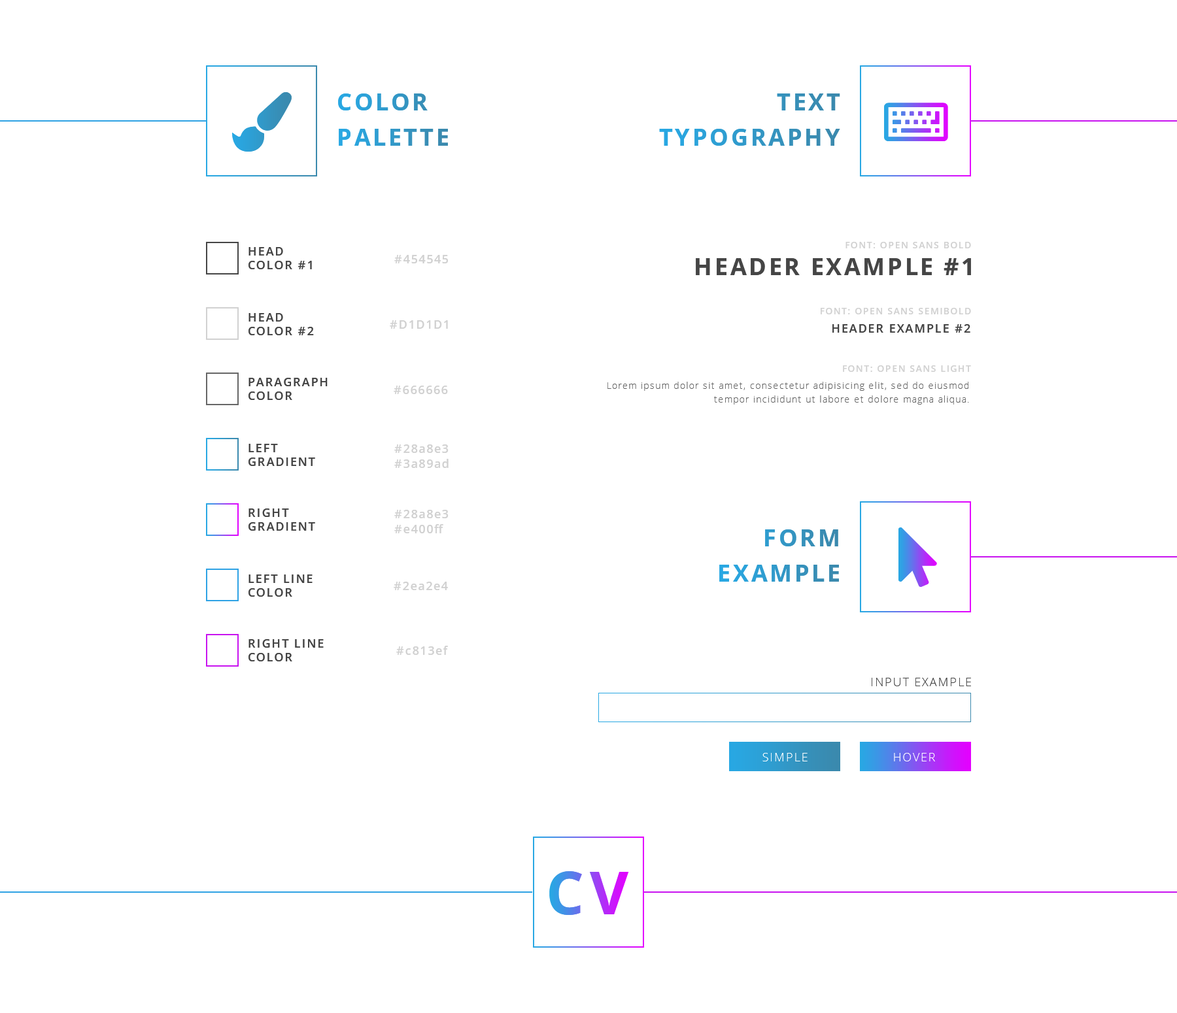
<style>
.page{position:relative;width:1177px;height:1013px;background:#ffffff}
.page>*{position:absolute;margin:0}
.t1{font:23.5px/35.3px "OpenSans-Bold";letter-spacing:0.1em;color:#3198c8}
.t2{font:23.5px/35.3px "OpenSans-Bold";letter-spacing:0.1em;color:#3592be}
.t3{font:9.2px "OpenSans-Semibold";letter-spacing:0.1em;color:#d1d1d1}
.t4{font:11.8px/13.7px "OpenSans-Semibold";letter-spacing:0.1em;color:#454545}
.t5{font:11.8px "OpenSans-Semibold";letter-spacing:0.1em;color:#d1d1d1}
.t6{font:23.5px "OpenSans-Bold";letter-spacing:0.1em;color:#454545}
.t7{font:11.8px "OpenSans-Semibold";letter-spacing:0.1em;color:#454545}
.t8{font:9.2px/13.7px "OpenSans-Light";letter-spacing:0.1em;color:#666666}
.t9{font:23.5px/35.3px "OpenSans-Bold";letter-spacing:0.1em;color:#3395c3}
.t10{font:11.8px "OpenSans-Light";letter-spacing:0.1em;color:#454545;text-transform:uppercase}
.t11{font:11.8px "OpenSans-Light";letter-spacing:0.1em;color:#ffffff;text-transform:uppercase}
.t12{font:59.5px "OpenSans-Bold";letter-spacing:0.1em}
</style>
<div class="page">
<p class="t1" style="left:338px;top:93px;width:110px;height:53px">COLOR<br>PALETTE</p>
<p class="t2" style="left:659px;top:93px;width:181px;height:53px;text-align:right">TEXT<br>TYPOGRAPHY</p>
<p class="t3" style="left:845px;top:242px;width:126px;height:6px">FONT: OPEN SANS BOLD</p>
<p class="t4" style="left:248px;top:247px;width:64px;height:22px">HEAD<br>COLOR #1</p>
<p class="t5" style="left:394px;top:255px;width:54px;height:8px">#454545</p>
<p class="t6" style="left:696px;top:258px;width:275px;height:17px">HEADER EXAMPLE #1</p>
<p class="t4" style="left:248px;top:313px;width:66px;height:22px">HEAD<br>COLOR #2</p>
<p class="t3" style="left:820px;top:308px;width:151px;height:6px">FONT: OPEN SANS SEMIBOLD</p>
<p class="t5" style="left:390px;top:320px;width:58px;height:9px">#D1D1D1</p>
<p class="t7" style="left:832px;top:324px;width:138px;height:9px">HEADER EXAMPLE #2</p>
<p class="t3" style="left:843px;top:365px;width:128px;height:7px">FONT: OPEN SANS LIGHT</p>
<p class="t4" style="left:248px;top:378px;width:80px;height:22px">PARAGRAPH<br>COLOR</p>
<p class="t5" style="left:394px;top:386px;width:54px;height:8px">#666666</p>
<p class="t8" style="left:607px;top:382px;width:362px;height:23px;text-align:right">Lorem ipsum dolor sit amet, consectetur adipisicing elit, sed do eiusmod tempor incididunt ut labore et dolore magna aliqua.</p>
<p class="t4" style="left:248px;top:444px;width:67px;height:22px">LEFT <br>GRADIENT</p>
<p class="t5" style="left:394px;top:445px;width:54px;height:8px">#28a8e3</p>
<p class="t5" style="left:394px;top:459px;width:54px;height:9px">#3a89ad</p>
<p class="t4" style="left:248px;top:509px;width:67px;height:22px">RIGHT <br>GRADIENT</p>
<p class="t5" style="left:394px;top:510px;width:54px;height:8px">#28a8e3</p>
<p class="t5" style="left:394px;top:524px;width:49px;height:9px">#e400ff</p>
<p class="t9" style="left:719px;top:530px;width:120px;height:52px;text-align:right">FORM<br>EXAMPLE</p>
<p class="t4" style="left:248px;top:575px;width:64px;height:22px">LEFT LINE<br>COLOR</p>
<p class="t5" style="left:394px;top:582px;width:54px;height:8px">#2ea2e4</p>
<p class="t4" style="left:248px;top:639px;width:76px;height:23px">RIGHT LINE<br>COLOR</p>
<p class="t5" style="left:396px;top:646px;width:52px;height:9px">#c813ef</p>
<p class="t10" style="left:871px;top:678px;width:100px;height:8px">INPUT EXAMPLE</p>
<p class="t11" style="left:762px;top:753px;width:45px;height:9px">SIMPLE</p>
<p class="t11" style="left:894px;top:753px;width:41px;height:9px">HOVER</p>
<p class="t12" style="left:549px;top:871px;width:80px;height:44px">CV</p>
</div>
